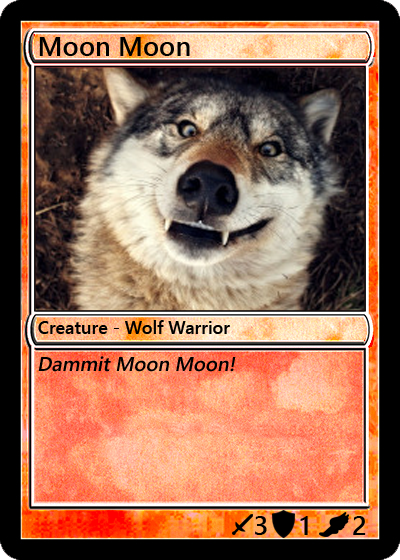
<style>
.page{position:relative;width:400px;height:560px}
.page>*{position:absolute;margin:0}
.t1{font:27px "YuGothicUI-Semibold";color:#000000}
.t2{font:18px "YuGothicUI-Semibold";color:#000000}
.t3{font:20px "YuGothicUI-Semibold";color:#000000;font-style:italic}
</style>
<div class="page">
<p class="t1" style="left:39px;top:37px;width:151px;height:19px">Moon Moon</p>
<p class="t2" style="left:38px;top:320px;width:192px;height:14px">Creature - Wolf Warrior</p>
<p class="t3" style="left:38px;top:356px;width:198px;height:16px">Dammit Moon Moon!</p>
<p class="t1" style="left:255px;top:516px;width:12px;height:19px">3</p>
<p class="t1" style="left:300px;top:516px;width:8px;height:19px">1</p>
<p class="t1" style="left:353px;top:516px;width:13px;height:19px">2</p>
</div>
